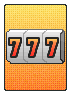
<style>
.page{position:relative;width:71px;height:95px;background:#ffffff}
.page>*{position:absolute;margin:0}
.t1{font:26px "AcmeFont";scale:0.83 1}
</style>
<div class="page">
<p class="t1" style="left:9px;top:38px;width:12px;height:19px">7</p>
<p class="t1" style="left:27px;top:38px;width:12px;height:19px">7</p>
<p class="t1" style="left:46px;top:38px;width:12px;height:19px">7</p>
</div>
